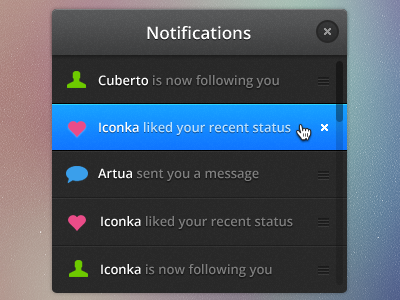
<style>
.page{position:relative;width:400px;height:300px;background:#282828}
.page>*{position:absolute;margin:0}
.t1{font:17px "OpenSans-Semibold";color:#ffffff}
.t2{font:13px "OpenSans-Semibold";color:#7f7f7f}
.t3{font:13px "OpenSans-Semibold";color:#ffffff}
.t4{font:13px "OpenSans-Semibold";color:#bbe1ff}
.t5{font:13px "OpenSans-Semibold";color:#fefefe}
</style>
<div class="page">
<p class="t1" style="left:147px;top:26px;width:104px;height:14px">Notifications</p>
<p class="t2" style="left:98px;top:75px;width:181px;height:13px"><span class="t3">Cuberto</span> is now following you</p>
<p class="t4" style="left:99px;top:122px;width:192px;height:13px"><span class="t3">Iconka</span> liked your recent status</p>
<p class="t2" style="left:98px;top:168px;width:161px;height:13px"><span class="t3">Artua </span>sent you a message</p>
<p class="t2" style="left:101px;top:216px;width:192px;height:13px"><span class="t5">Iconka </span>liked your recent status</p>
<p class="t2" style="left:101px;top:264px;width:171px;height:13px"><span class="t3">Iconka </span>is now following you</p>
</div>
